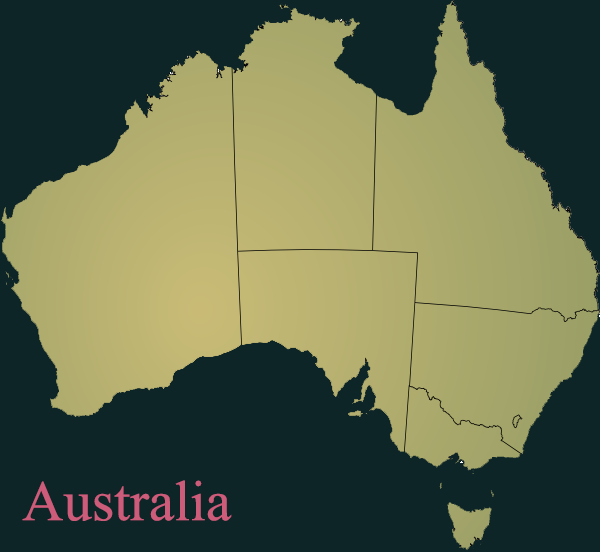
<style>
.page{position:relative;width:600px;height:552px;background:#0e2528}
.page>*{position:absolute;margin:0}
.t1{font:57px "TimesNewRomanPSMT";color:#cc5c7a}
</style>
<div class="page">
<p class="t1" style="left:22px;top:480px;width:210px;height:41px">Australia</p>
</div>
